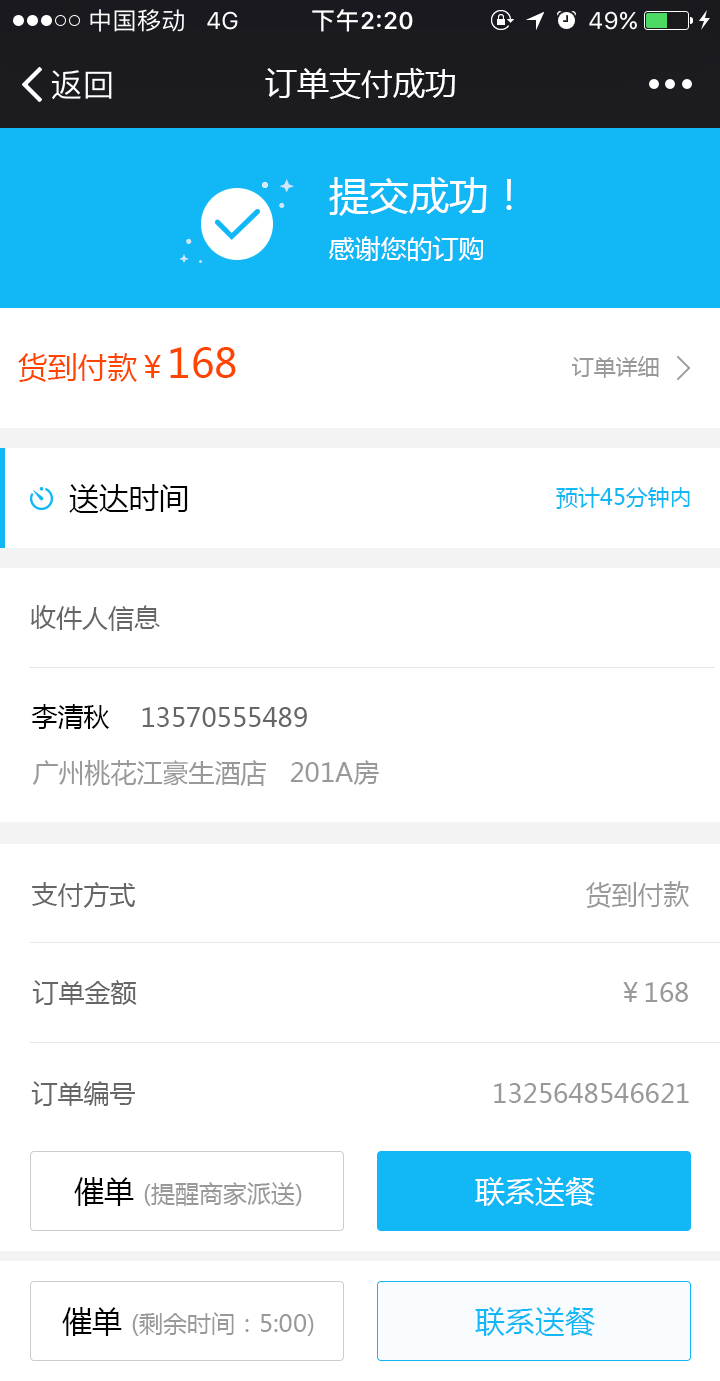
<style>
.page{position:relative;width:720px;height:1381px;background:#ffffff}
.page>*{position:absolute;margin:0}
.t1{font:32px "MicrosoftYaHei";color:#ffffff}
.t2{font:26px/36px "MicrosoftYaHei";color:#ffffff}
.t3{font:40px/60px "MicrosoftYaHei";color:#ffffff}
.t4{font:30px "MicrosoftYaHei";color:#ff4400}
.t5{font:40px "MicrosoftYaHei";color:#ff4400}
.t6{font:22px "MicrosoftYaHei";color:#999999}
.t7{font:30px "MicrosoftYaHei";color:#000000}
.t8{font:22px "MicrosoftYaHei";color:#12b7f5}
.t9{font:26px "MicrosoftYaHei";color:#666666}
.t10{font:26px "MicrosoftYaHei";color:#000000}
.t11{font:26px "MicrosoftYaHei";color:#999999}
.t12{font:24px "MicrosoftYaHei";color:#999999}
.t13{font:30px "MicrosoftYaHei";color:#fefefe}
.t14{font:30px "MicrosoftYaHei";color:#12b7f5}
</style>
<div class="page">
<p class="t1" style="left:265px;top:68px;width:190px;height:31px">订单支付成功</p>
<p class="t2" style="left:329px;top:177px;width:183px;height:84px"><span class="t3">提交成功！<br></span>感谢您的订购</p>
<p class="t4" style="left:18px;top:347px;width:218px;height:35px">货到付款￥<span class="t5">168</span></p>
<p class="t6" style="left:572px;top:356px;width:87px;height:22px">订单详细</p>
<p class="t7" style="left:69px;top:484px;width:119px;height:29px">送达时间</p>
<p class="t8" style="left:556px;top:487px;width:134px;height:22px">预计45分钟内</p>
<p class="t9" style="left:31px;top:605px;width:129px;height:26px">收件人信息</p>
<p class="t10" style="left:31px;top:704px;width:79px;height:25px">李清秋</p>
<p class="t9" style="left:142px;top:707px;width:165px;height:20px">13570555489</p>
<p class="t11" style="left:32px;top:760px;width:347px;height:26px">广州桃花江豪生酒店   201A房</p>
<p class="t11" style="left:586px;top:881px;width:103px;height:27px">货到付款</p>
<p class="t9" style="left:32px;top:882px;width:104px;height:26px">支付方式</p>
<p class="t9" style="left:32px;top:980px;width:105px;height:25px">订单金额</p>
<p class="t11" style="left:623px;top:982px;width:65px;height:20px">￥168</p>
<p class="t9" style="left:31px;top:1081px;width:104px;height:25px">订单编号</p>
<p class="t11" style="left:494px;top:1083px;width:195px;height:20px">1325648546621</p>
<p class="t12" style="left:74px;top:1177px;width:228px;height:29px"><span class="t7">催单 </span>(提醒商家派送)</p>
<p class="t13" style="left:475px;top:1177px;width:120px;height:29px">联系送餐</p>
<p class="t12" style="left:62px;top:1307px;width:252px;height:29px"><span class="t7">催单 </span>(剩余时间：5:00)</p>
<p class="t14" style="left:475px;top:1307px;width:120px;height:29px">联系送餐</p>
</div>
